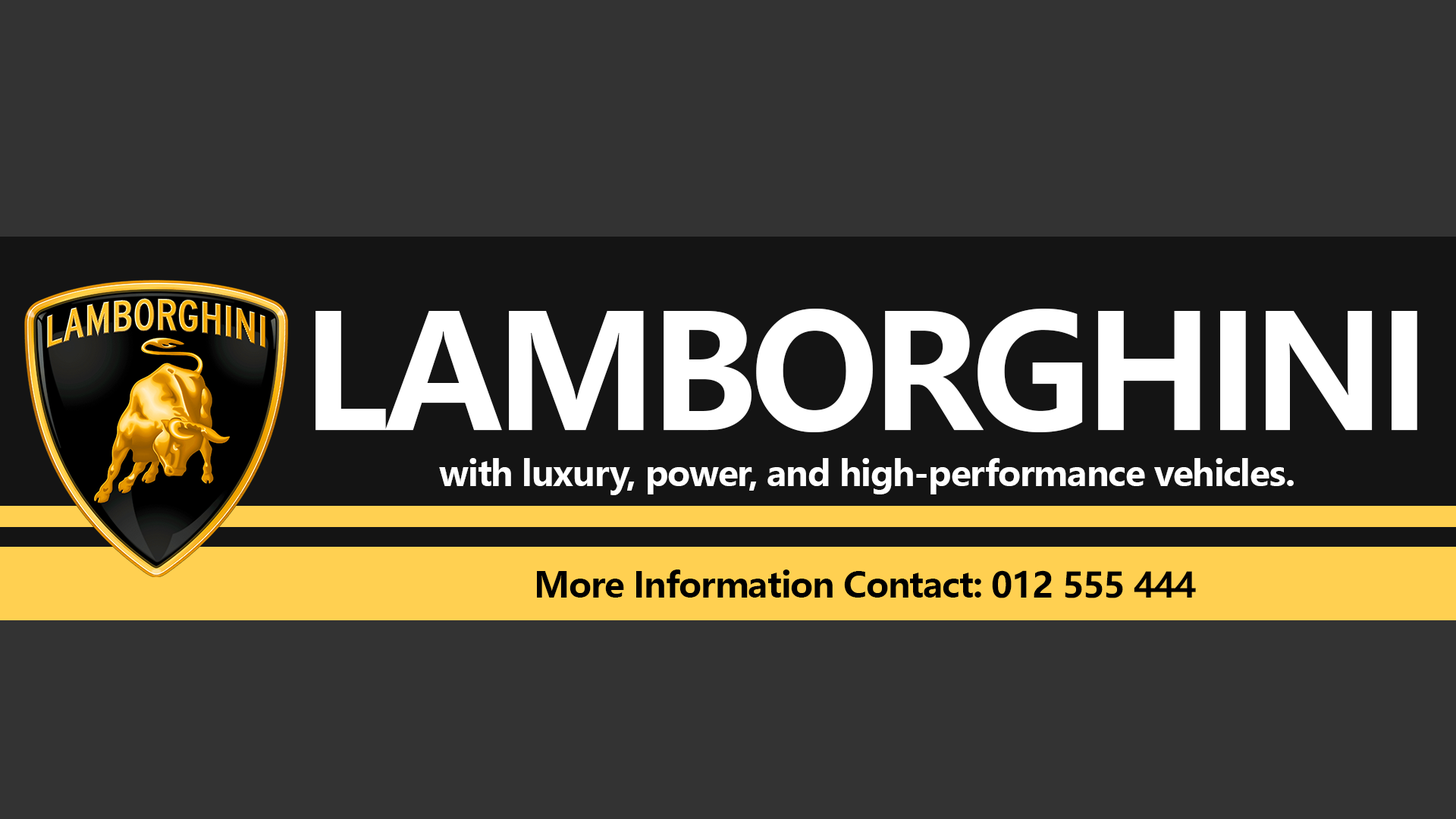
<style>
.page{position:relative;width:1456px;height:819px;background:#333333}
.page>*{position:absolute;margin:0}
.t1{font:158px "MicrosoftYaHei-Bold";letter-spacing:-0.05em;color:#ffffff}
.t2{font:34.8px "MicrosoftYaHei-Bold";letter-spacing:-0.025em;color:#ffffff}
.t3{font:34.8px "MicrosoftYaHeiUI-Bold";letter-spacing:-0.025em;color:#000000}
</style>
<div class="page">
<p class="t1" style="left:315px;top:309px;width:1102px;height:123px">LAMBORGHINI</p>
<p class="t2" style="left:439px;top:458px;width:855px;height:37px">with luxury, power, and high-performance vehicles.</p>
<p class="t3" style="left:537px;top:570px;width:659px;height:28px">More Information Contact: 012 555 444</p>
</div>
